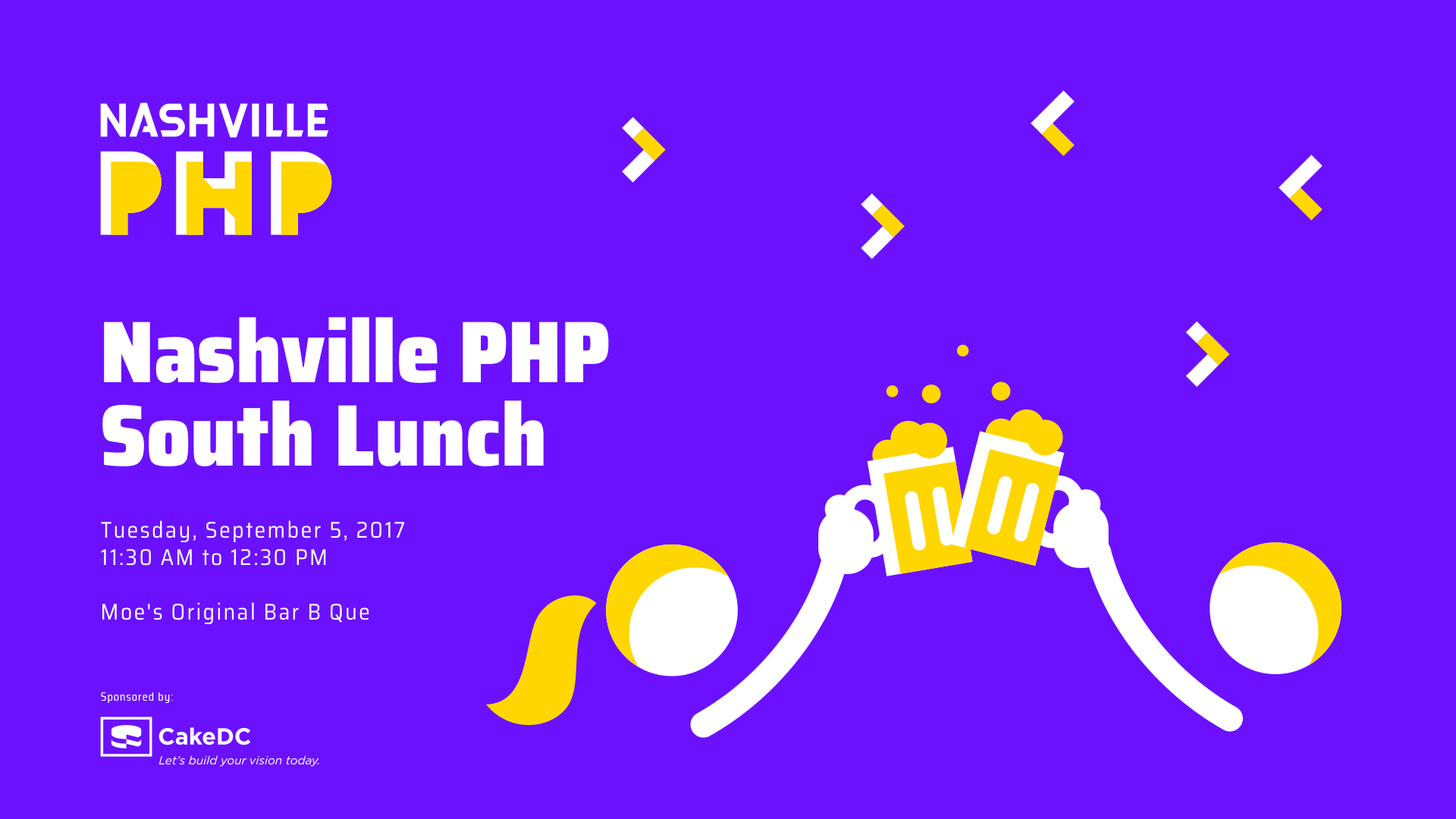
<style>
.page{position:relative;width:1456px;height:819px;background:#6b11ff}
.page>*{position:absolute;margin:0}
.t1{font:87.4px/83.4px "SairaSemiCondensed-Black";color:#ffffff}
.t2{font:22.7px "SairaSemiCondensed-Regular";letter-spacing:0.075em;color:#ffffff}
</style>
<div class="page">
<p class="t1" style="left:102px;top:317px;width:507px;height:149px">Nashville PHP<br>South Lunch</p>
<p class="t2" style="left:101px;top:520px;width:303px;height:105px">Tuesday, September 5, 2017<br>11:30 AM to 12:30 PM<br><br>Moe's Original Bar B Que</p>
</div>
